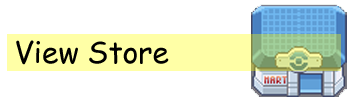
<style>
.page{position:relative;width:350px;height:100px;background:#ffffff}
.page>*{position:absolute;margin:0}
.t1{font:29.9px "ComicSansMS";color:#000000}
</style>
<div class="page">
<p class="t1" style="left:16px;top:40px;width:153px;height:25px">View Store</p>
</div>
